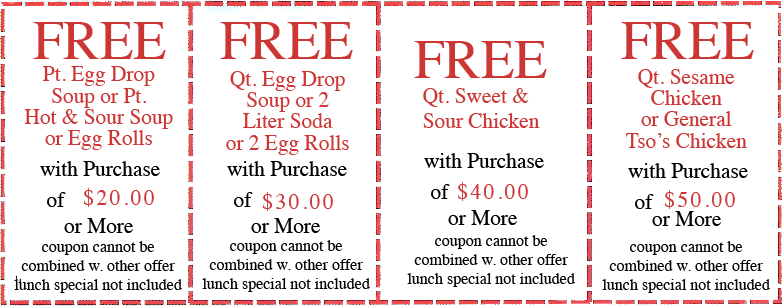
<style>
.page{position:relative;width:782px;height:306px;background:#ffffff}
.page>*{position:absolute;margin:0}
.t1{font:54.7px "Times-Roman";color:#cc3735}
.t2{font:21.3px/21.3px "Times-Roman";color:#cc3735}
.t3{font:21.3px "Times-Roman";color:#cc3735}
.t4{font:21.3px "Times-Roman";color:#000000}
.t5{font:21.3px "Times-Roman";letter-spacing:0.12em;color:#cc3735}
.t6{font:16px "Times-Roman";color:#000000}
</style>
<div class="page">
<p class="t1" style="left:414px;top:41px;width:133px;height:37px">FREE</p>
<p class="t2" style="left:24px;top:66px;width:149px;height:84px;text-align:center">Pt. Egg Drop<br>Soup or Pt.<br>Hot &amp; Sour Soup<br>or Egg Rolls</p>
<p class="t2" style="left:226px;top:71px;width:123px;height:84px;text-align:center">Qt. Egg Drop<br>Soup or 2<br>Liter Soda<br>or 2 Egg Rolls</p>
<p class="t2" style="left:626px;top:69px;width:121px;height:79px;text-align:center">Qt. Sesame<br>Chicken<br>or General<br>Tso’s Chicken</p>
<p class="t3" style="left:423px;top:88px;width:117px;height:40px">Qt. Sweet &amp;<br>Sour Chicken</p>
<p class="t4" style="left:40px;top:161px;width:120px;height:15px">with Purchase</p>
<p class="t4" style="left:227px;top:161px;width:120px;height:15px">with Purchase</p>
<p class="t4" style="left:424px;top:153px;width:120px;height:15px">with Purchase</p>
<p class="t4" style="left:628px;top:163px;width:120px;height:15px">with Purchase</p>
<p class="t4" style="left:431px;top:184px;width:19px;height:15px">of</p>
<p class="t5" style="left:458px;top:182px;width:70px;height:19px">$40.00</p>
<p class="t4" style="left:47px;top:192px;width:19px;height:15px">of</p>
<p class="t5" style="left:84px;top:188px;width:70px;height:19px">$20.00</p>
<p class="t4" style="left:234px;top:192px;width:19px;height:15px">of</p>
<p class="t5" style="left:263px;top:192px;width:70px;height:19px">$30.00</p>
<p class="t4" style="left:635px;top:194px;width:19px;height:15px">of</p>
<p class="t5" style="left:665px;top:190px;width:70px;height:19px">$50.00</p>
<p class="t4" style="left:64px;top:218px;width:69px;height:15px">or More</p>
<p class="t4" style="left:251px;top:218px;width:69px;height:15px">or More</p>
<p class="t4" style="left:448px;top:210px;width:69px;height:15px">or More</p>
<p class="t4" style="left:652px;top:211px;width:69px;height:15px">or More</p>
<p class="t6" style="left:14px;top:241px;width:168px;height:52px;text-align:center">coupon cannot be<br>combined w. other offer<br>lunch special not included</p>
<p class="t6" style="left:202px;top:240px;width:168px;height:52px;text-align:center">coupon cannot be<br>combined w. other offer<br>lunch special not included</p>
<p class="t6" style="left:407px;top:235px;width:168px;height:52px;text-align:center">coupon cannot be<br>combined w. other offer<br>lunch special not included</p>
<p class="t6" style="left:602px;top:241px;width:168px;height:52px;text-align:center">coupon cannot be<br>combined w. other offer<br>lunch special not included</p>
</div>
